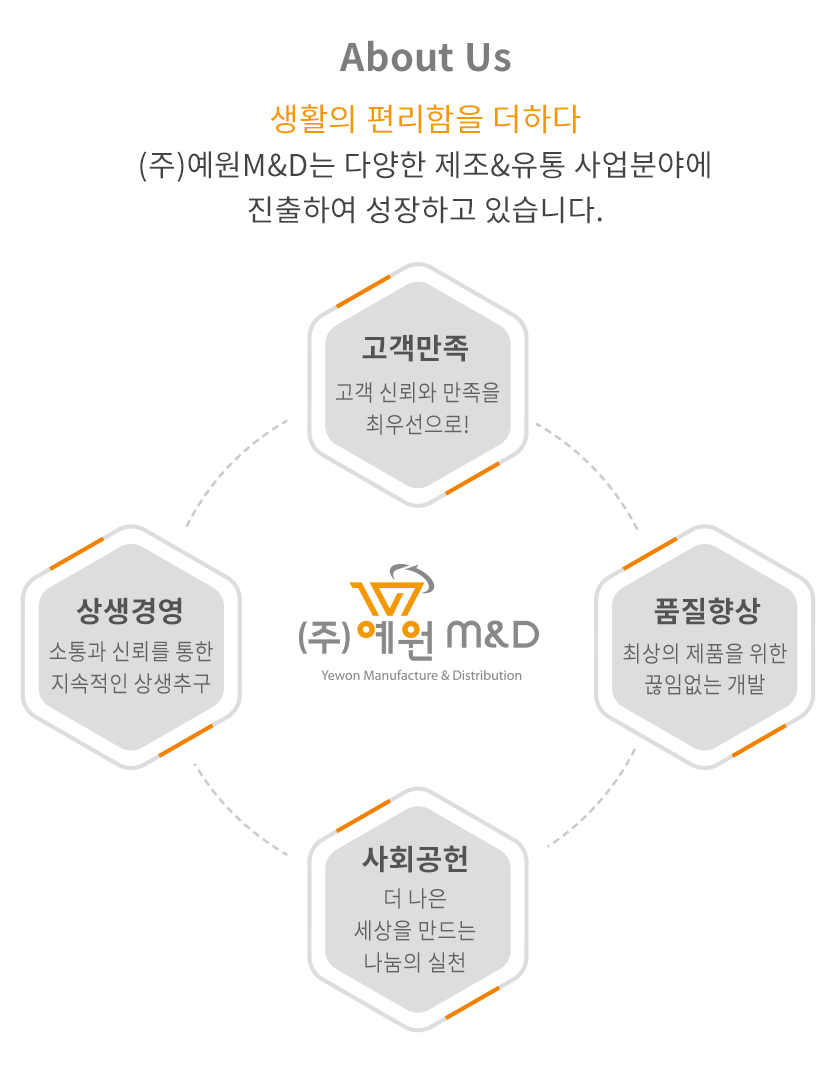
<style>
.page{position:relative;width:837px;height:1068px;background:#ffffff}
.page>*{position:absolute;margin:0}
.t1{font:38px "NotoSansCJKkr-Bold";letter-spacing:0.01em;color:#7d7d7d}
.t2{font:30px/45px "NotoSansCJKkr-Regular";letter-spacing:0.01em;color:#434343}
.t3{font:32px/35.5px "NotoSansCJKkr-Regular";letter-spacing:0.01em;color:#f39800}
.t4{font:29.1px "NotoSansCJKkr-Bold";letter-spacing:0.01em;color:#535353}
.t5{font:22.8px/31.7px "NotoSansCJKkr-Regular";letter-spacing:0.01em;color:#626262;scale:0.92 1}
.t6{font:22.8px/31.7px "NotoSansCJKkr-Regular";letter-spacing:0.01em;color:#626262;scale:0.93 1}
</style>
<div class="page">
<p class="t1" style="left:339px;top:40px;width:172px;height:32px">About Us</p>
<p class="t2" style="left:140px;top:104px;width:570px;height:120px;text-align:center"><span class="t3">생활의 편리함을 더하다<br></span>(주)예원M&amp;D는 다양한 제조&amp;유통 사업분야에 진출하여 성장하고 있습니다.</p>
<p class="t4" style="left:362px;top:334px;width:106px;height:28px">고객만족</p>
<p class="t5" style="left:336px;top:382px;width:164px;height:53px;text-align:center">고객 신뢰와 만족을 최우선으로!</p>
<p class="t4" style="left:76px;top:597px;width:106px;height:28px">상생경영</p>
<p class="t4" style="left:654px;top:597px;width:107px;height:28px">품질향상</p>
<p class="t5" style="left:49px;top:641px;width:164px;height:53px;text-align:center">소통과 신뢰를 통한<br>지속적인 상생추구</p>
<p class="t5" style="left:623px;top:643px;width:164px;height:52px;text-align:center">최상의 제품을 위한<br>끊임없는 개발</p>
<p class="t4" style="left:362px;top:845px;width:105px;height:28px">사회공헌</p>
<p class="t6" style="left:354px;top:888px;width:122px;height:85px;text-align:center">더 나은 <br>세상을 만드는 <br>나눔의 실천</p>
</div>
